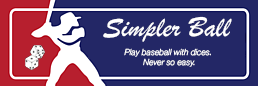
<style>
.page{position:relative;width:258px;height:86px;background:#232766}
.page>*{position:absolute;margin:0}
.t1{font:29.2px "BrushScriptMT";color:#ffffff}
.t2{font:8.3px "HelveticaNeue-LightItalic";color:#ffffff}
</style>
<div class="page">
<p class="t1" style="left:103px;top:16px;width:129px;height:26px">Simpler Ball</p>
<p class="t2" style="left:124px;top:48px;width:87px;height:19px;text-align:center">Play baseball with dices. <br>Never so easy.</p>
</div>
